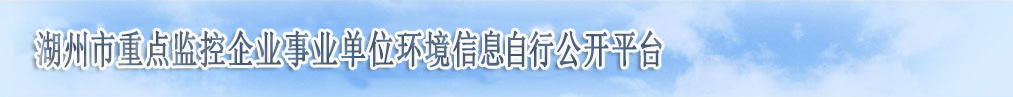
<style>
.page{position:relative;width:1013px;height:97px}
.page>*{position:absolute;margin:0}
.t1{font:39px "SimSun";letter-spacing:0.12em;color:#50667e;font-weight:bold;scale:0.66 1}
</style>
<div class="page">
<p class="t1" style="left:36px;top:30px;width:626px;height:38px">湖州市重点监控企业事业单位环境信息自行公开平台</p>
</div>
